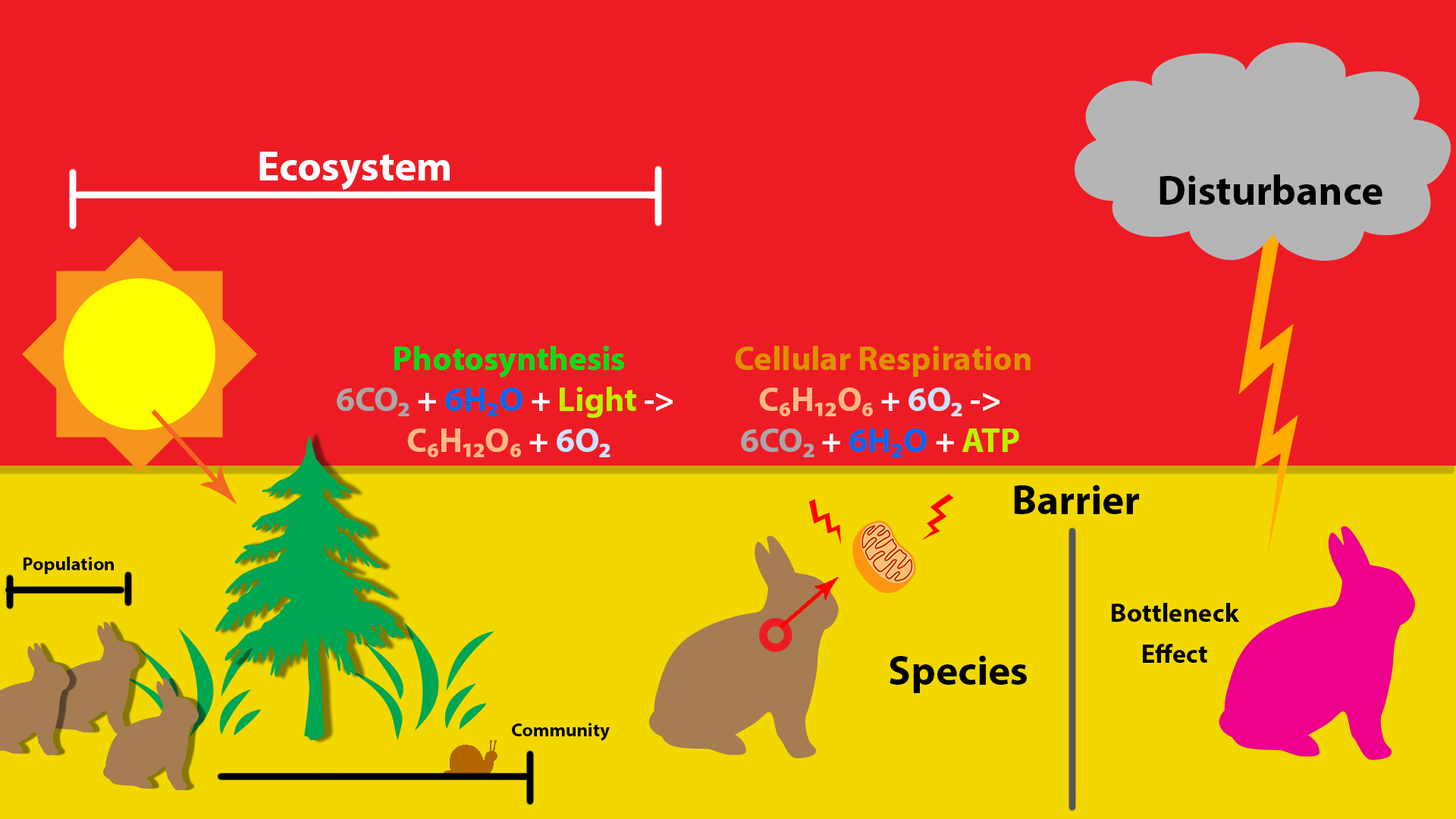
<style>
.page{position:relative;width:1456px;height:819px;background:#ed1c24}
.page>*{position:absolute;margin:0}
.t1{font:41.7px "MyriadPro-Bold";color:#ffffff}
.t2{font:41.7px "MyriadPro-Bold";color:#000000}
.t3{font:34.1px/40.9px "MyriadPro-Bold";color:#00de1a}
.t4{font:34.1px/40.9px "MyriadPro-Bold";color:#a7a7a7}
.t5{font:34.1px/40.9px "MyriadPro-Bold";color:#ffffff}
.t6{font:34.1px/40.9px "MyriadPro-Bold";color:#0067f2}
.t7{font:34.1px/40.9px "MyriadPro-Bold";color:#bcf200}
.t8{font:34.1px/40.9px "MyriadPro-Bold";color:#ffb986}
.t9{font:34.1px/40.9px "MyriadPro-Bold";color:#cce2ff}
.t10{font:34.1px/40.9px "MyriadPro-Bold";color:#de9200}
.t11{font:19px "MyriadPro-Bold";color:#000000}
.t12{font:26.5px/40.9px "MyriadPro-Bold";color:#000000}
</style>
<div class="page">
<p class="t1" style="left:259px;top:152px;width:191px;height:38px">Ecosystem</p>
<p class="t2" style="left:1159px;top:174px;width:223px;height:31px">Disturbance</p>
<p class="t3" style="left:337px;top:346px;width:336px;height:111px;text-align:center">Photosynthesis<br><span class="t4">6CO₂ </span><span class="t5">+</span><span class="t6"> 6H₂O </span><span class="t5">+ </span><span class="t7">Light </span><span class="t5">-&gt; <br></span><span class="t8">C₆H₁₂O₆ </span><span class="t5">+ </span><span class="t9">6O₂</span></p>
<p class="t10" style="left:735px;top:346px;width:296px;height:111px;text-align:center">Cellular Respiration<br><span class="t8">C₆H₁₂O₆ </span><span class="t5">+ </span><span class="t9">6O₂ </span><span class="t5">-&gt; <br></span><span class="t4">6CO₂ </span><span class="t5">+</span><span class="t6"> 6H₂O </span><span class="t5">+ </span><span class="t7">ATP</span></p>
<p class="t2" style="left:1014px;top:485px;width:125px;height:29px">Barrier</p>
<p class="t11" style="left:24px;top:557px;width:90px;height:17px">Population</p>
<p class="t12" style="left:1112px;top:603px;width:128px;height:60px;text-align:center">Bottleneck<br>Effect</p>
<p class="t2" style="left:890px;top:655px;width:137px;height:38px">Species</p>
<p class="t11" style="left:512px;top:723px;width:98px;height:18px">Community</p>
</div>
